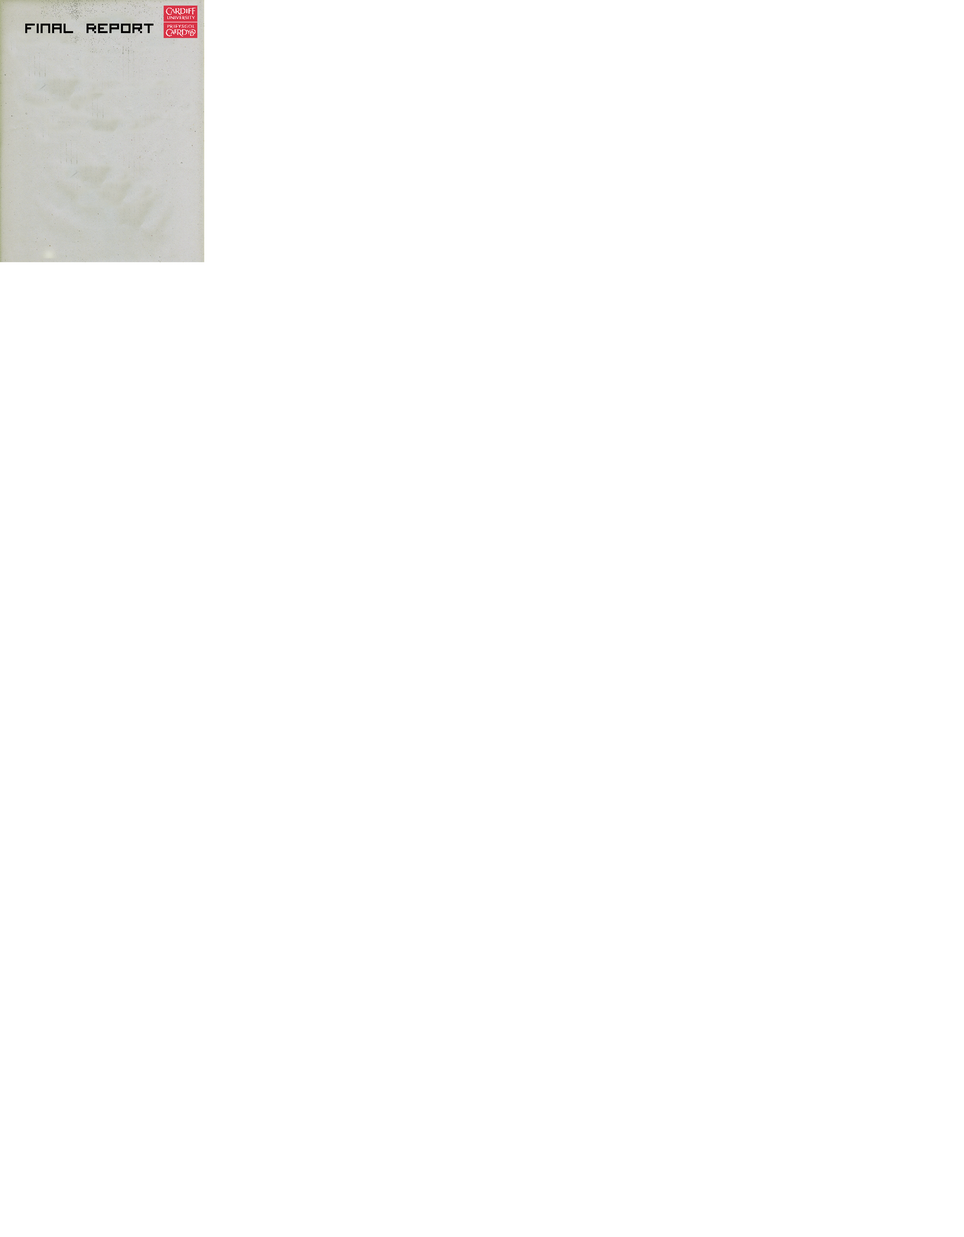
<style>
.page{position:relative;width:964px;height:1237px;background:#ffffff}
.page>*{position:absolute;margin:0}
.t1{font:19.1px "VisitorTT1BRK";color:#000000}
</style>
<div class="page">
<p class="t1" style="left:25px;top:24px;width:128px;height:9px">Final Report</p>
</div>
